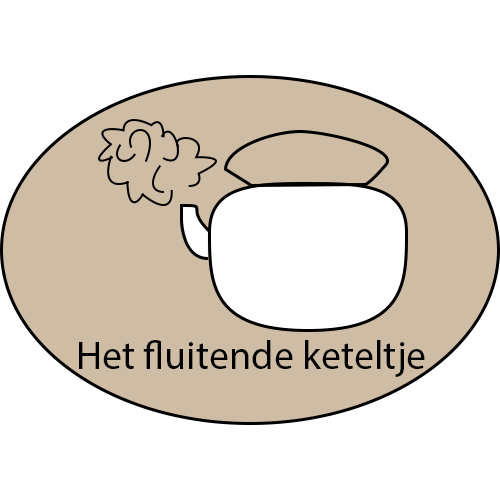
<style>
.page{position:relative;width:500px;height:500px;background:#ffffff}
.page>*{position:absolute;margin:0}
.t1{font:40px "MyriadPro-Regular";color:#000000}
</style>
<div class="page">
<p class="t1" style="left:79px;top:340px;width:346px;height:37px">Het fluitende keteltje</p>
</div>
